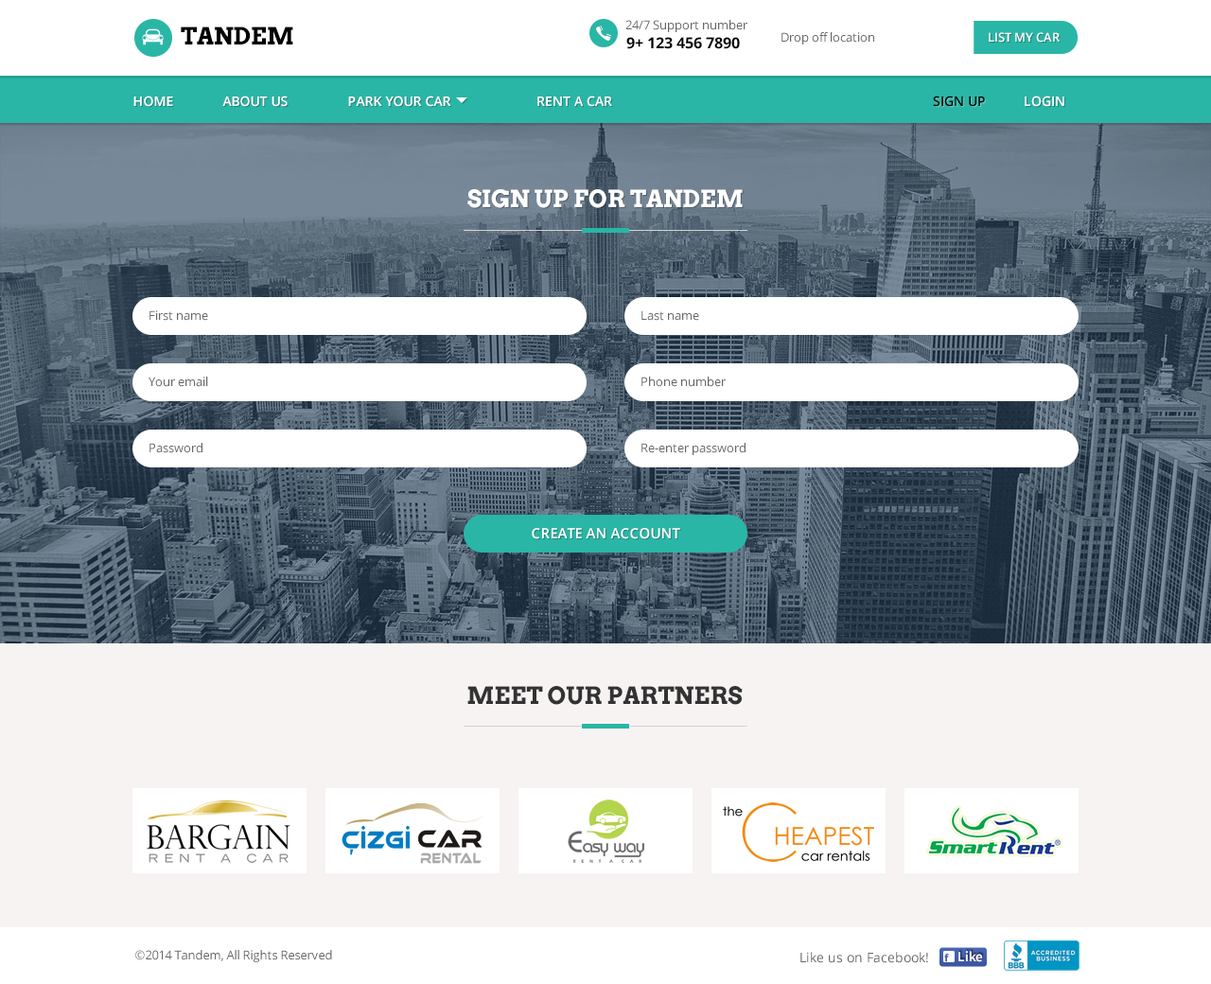
<style>
.page{position:relative;width:1211px;height:984px;background:#ffffff}
.page>*{position:absolute;margin:0}
.t1{font:23.7px "Arvo-Bold";color:#000000}
.t2{font:12.3px "OpenSans";color:#666666}
.t3{font:15.1px "OpenSans-Bold";color:#000000}
.t4{font:12.3px "OpenSans-Semibold";color:#ffffff}
.t5{font:13.3px "OpenSans-Semibold";color:#ffffff}
.t6{font:13.3px "OpenSans-Semibold";color:#000000}
.t7{font:23.7px "Arvo-Bold";color:#ffffff}
.t8{font:14.2px "OpenSans-Semibold";color:#ffffff}
.t9{font:23.7px "Arvo-Bold";color:#333333}
.t10{font:13.3px "OpenSans";color:#666666}
.t11{font:14.2px "SourceSansPro-Semibold";color:#ffffff}
</style>
<div class="page">
<p class="t1" style="left:181px;top:27px;width:112px;height:17px">TANDEM</p>
<p class="t2" style="left:626px;top:20px;width:122px;height:12px">24/7 Support number</p>
<p class="t3" style="left:627px;top:37px;width:113px;height:12px">9+ 123 456 7890</p>
<p class="t2" style="left:782px;top:32px;width:93px;height:12px">Drop off location</p>
<p class="t4" style="left:989px;top:32px;width:71px;height:11px">LIST MY CAR</p>
<p class="t5" style="left:133px;top:96px;width:40px;height:11px">HOME</p>
<p class="t5" style="left:222px;top:96px;width:66px;height:11px">ABOUT US</p>
<p class="t5" style="left:348px;top:96px;width:103px;height:11px">PARK YOUR CAR</p>
<p class="t5" style="left:538px;top:96px;width:74px;height:11px">RENT A CAR</p>
<p class="t6" style="left:933px;top:96px;width:52px;height:11px">SIGN UP</p>
<p class="t5" style="left:1025px;top:96px;width:40px;height:11px">LOGIN</p>
<p class="t7" style="left:468px;top:189px;width:275px;height:19px">SIGN UP FOR TANDEM</p>
<p class="t2" style="left:150px;top:310px;width:58px;height:11px">First name</p>
<p class="t2" style="left:642px;top:310px;width:57px;height:11px">Last name</p>
<p class="t2" style="left:149px;top:377px;width:59px;height:10px">Your email</p>
<p class="t2" style="left:642px;top:377px;width:84px;height:10px">Phone number</p>
<p class="t2" style="left:150px;top:443px;width:53px;height:10px">Password</p>
<p class="t2" style="left:642px;top:443px;width:104px;height:12px">Re-enter password</p>
<p class="t8" style="left:532px;top:528px;width:148px;height:11px">CREATE AN ACCOUNT</p>
<p class="t9" style="left:468px;top:686px;width:275px;height:19px">MEET OUR PARTNERS</p>
<p class="t2" style="left:135px;top:950px;width:197px;height:13px">©2014 Tandem, All Rights Reserved</p>
<p class="t10" style="left:801px;top:952px;width:127px;height:11px">Like us on Facebook!</p>
<p class="t11" style="left:959px;top:951px;width:23px;height:12px">Like</p>
</div>
